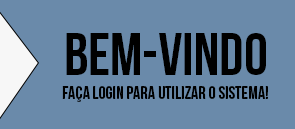
<style>
.page{position:relative;width:295px;height:129px;background:#6a8aaa}
.page>*{position:absolute;margin:0}
.t1{font:18px/24px "BebasNeue";color:#000000}
.t2{font:60px/24px "BebasNeue";color:#000000}
</style>
<div class="page">
<p class="t1" style="left:62px;top:33px;width:206px;height:69px;text-align:center"><span class="t2">Bem-vindo<br></span>faça login para utilizar o sistema!</p>
</div>
